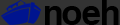
<style>
.page{position:relative;width:120px;height:25px;background:#333333}
.page>*{position:absolute;margin:0}
.t1{font:37.5px "CoolveticaRg-Regular";color:#000000}
</style>
<div class="page">
<p class="t1" style="left:45px;top:0px;width:74px;height:25px">noeh</p>
</div>
